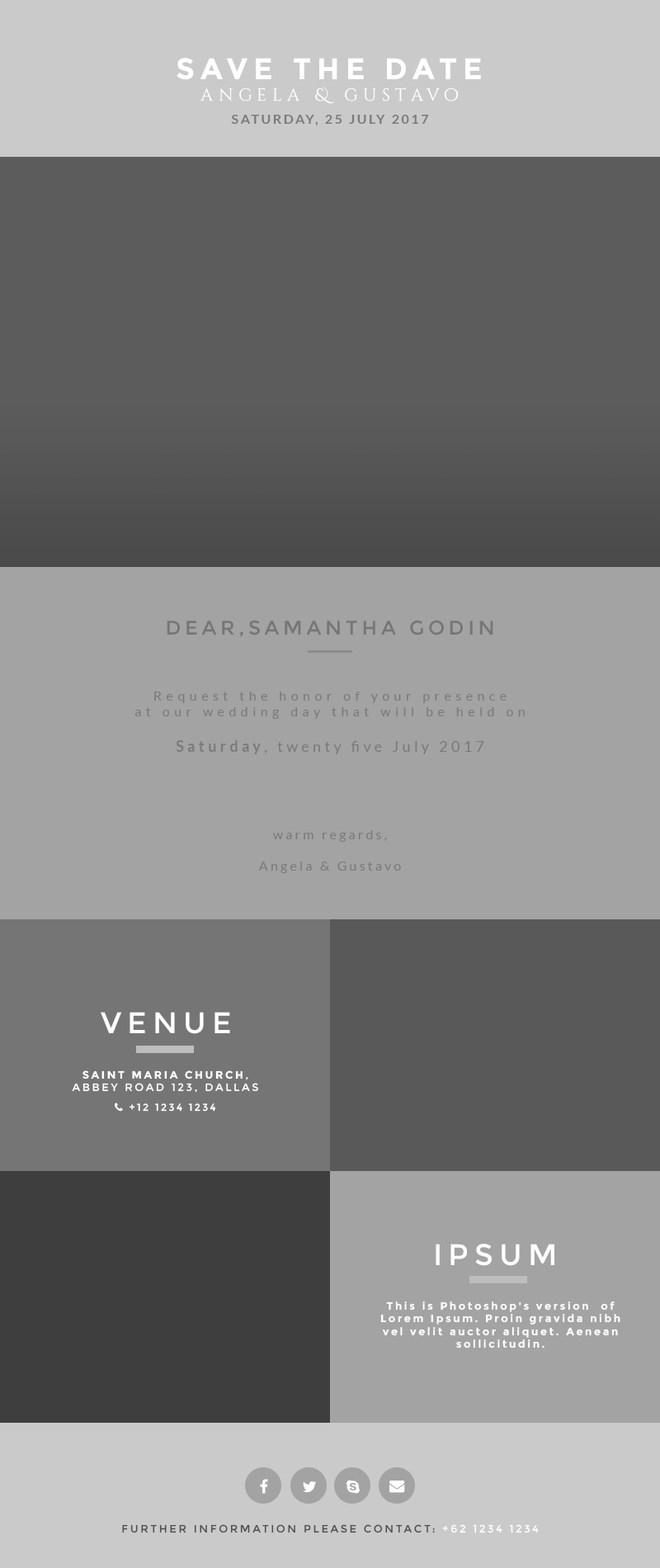
<style>
.page{position:relative;width:660px;height:1568px;background:#a3a3a3}
.page>*{position:absolute;margin:0}
.t1{font:29.7px "Montserrat-Bold";letter-spacing:0.2em;color:#ffffff}
.t2{font:17.3px "CinzelDecorative-Regular";letter-spacing:0.31em;color:#ffffff}
.t3{font:13.2px "Lato-Bold";letter-spacing:0.16em;color:#7c7c7c;text-transform:uppercase}
.t4{font:19.8px "Montserrat-Regular";letter-spacing:0.2em;color:#767676;text-transform:uppercase}
.t5{font:13.2px "Lato-Regular";letter-spacing:0.34em;color:#7a7a7a}
.t6{font:14.9px "Lato-Bold";letter-spacing:0.24em;color:#7a7a7a}
.t7{font:14.9px "Lato-Regular";letter-spacing:0.24em;color:#7a7a7a}
.t8{font:13.2px "Lato-Regular";letter-spacing:0.2em;color:#7a7a7a}
.t9{font:29.7px "Montserrat-Regular";letter-spacing:0.2em;color:#ffffff}
.t10{font:10.7px "Montserrat-Bold";letter-spacing:0.2em;color:#ffffff}
.t11{font:10.7px "Montserrat-Regular";letter-spacing:0.2em;color:#4e4e4e}
.t12{font:10.7px "Montserrat-Regular";letter-spacing:0.2em;color:#ffffff}
</style>
<div class="page">
<p class="t1" style="left:177px;top:58px;width:304px;height:22px">SAVE THE DATE</p>
<p class="t2" style="left:200px;top:87px;width:259px;height:17px">angela &amp; gustavo</p>
<p class="t3" style="left:231px;top:115px;width:198px;height:10px">saturday, 25 july 2017</p>
<p class="t4" style="left:167px;top:620px;width:327px;height:17px">dear,samantha godin</p>
<p class="t5" style="left:135px;top:692px;width:390px;height:181px;text-align:center">Request the honor of your presence <br>at our wedding day that will be held on <br><br><span class="t6">Saturday</span><span class="t7">, twenty five July 2017<br><br><br><br><br></span><span class="t8">warm regards,<br><br>Angela &amp; Gustavo</span></p>
<p class="t9" style="left:101px;top:1012px;width:129px;height:22px">VENUE</p>
<p class="t9" style="left:436px;top:1244px;width:119px;height:22px">IPSUM</p>
<p class="t10" style="left:380px;top:1301px;width:241px;height:47px;text-align:center">This is Photoshop's version  of Lorem Ipsum. Proin gravida nibh vel velit auctor aliquet. Aenean sollicitudin.</p>
<p class="t11" style="left:122px;top:1524px;width:417px;height:9px">FURTHER INFORMATION PLEASE CONTACT:<span class="t12"> +62 1234 1234</span></p>
</div>
